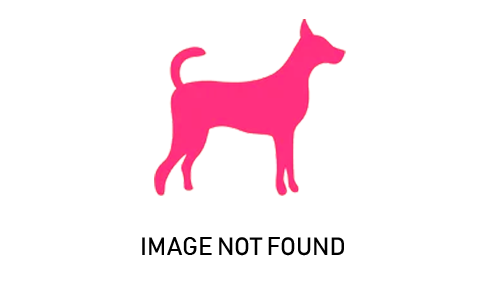
<style>
.page{position:relative;width:500px;height:300px;background:#ffffff}
.page>*{position:absolute;margin:0}
.t1{font:24.7px "Bahnschrift";color:#000000}
</style>
<div class="page">
<p class="t1" style="left:142px;top:237px;width:202px;height:19px">IMAGE NOT FOUND</p>
</div>
